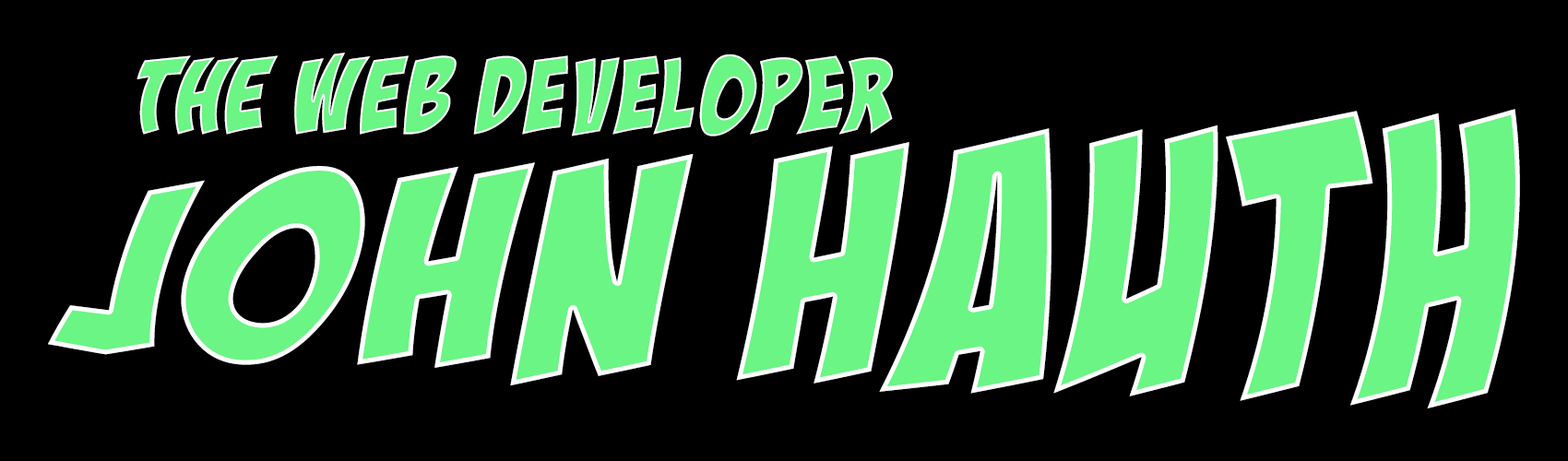
<style>
.page{position:relative;width:1568px;height:461px;background:#000000}
.page>*{position:absolute;margin:0}
.t1{font:101.9px "BadaBoomBB";color:#6af584}
.t2{font:328.5px "BadaBoomBB";color:#6af584}
</style>
<div class="page">
<p class="t1" style="left:137px;top:53px;width:756px;height:84px">The WEB DEVELOPer</p>
<p class="t2" style="left:48px;top:109px;width:1472px;height:300px">jOHN hauth</p>
</div>
